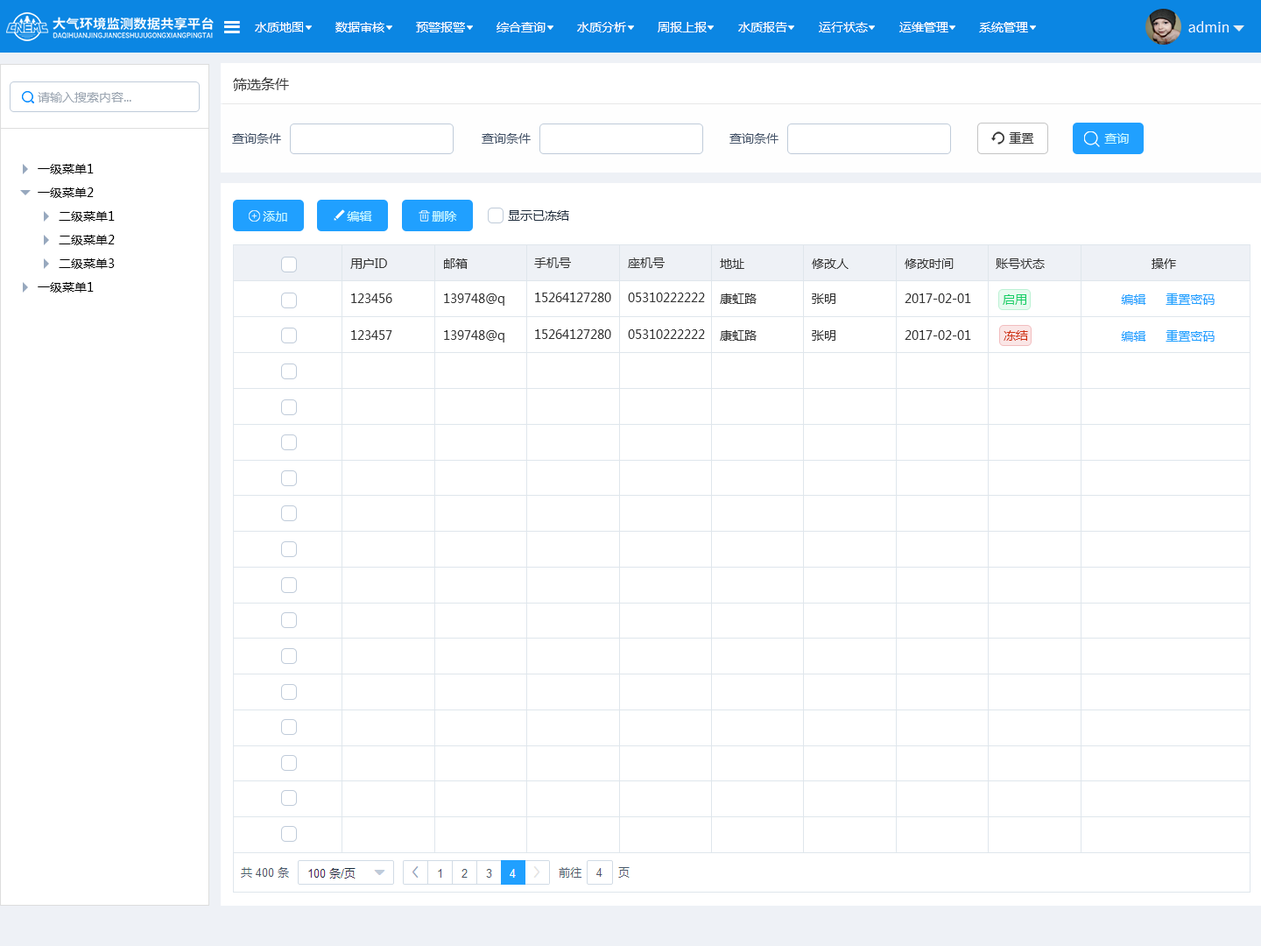
<style>
.page{position:relative;width:1261px;height:946px;background:#ffffff}
.page>*{position:absolute;margin:0}
.t1{font:12.3px "MicrosoftYaHei";color:#ffffff}
.t2{font:14px "SourceHanSansCN-Regular";color:#edf7ff}
.t3{font:14px "MicrosoftYaHei";color:#383838}
.t4{font:12.3px "MicrosoftYaHei";color:#9da7b3}
.t5{font:12.3px "MicrosoftYaHei";color:#47566b}
.t6{font:12.3px "MicrosoftYaHei";color:#383838}
.t7{font:12.3px "MicrosoftYaHei";color:#c7f9ff}
.t8{font:12.3px "MicrosoftYaHei";color:#000000}
.t9{font:12.3px "MicrosoftYaHei";color:#1f2d3d}
.t10{font:12.3px "MicrosoftYaHei";color:#333333}
.t11{font:12.3px "MicrosoftYaHei";color:#20a0ff}
.t12{font:12.3px "MicrosoftYaHei";color:#13ce66}
.t13{font:12.3px "MicrosoftYaHei";color:#cf3213}
</style>
<div class="page">
<p class="t1" style="left:255px;top:22px;width:48px;height:10px">水质地图</p>
<p class="t1" style="left:335px;top:22px;width:49px;height:10px">数据审核</p>
<p class="t1" style="left:416px;top:22px;width:49px;height:10px">预警报警</p>
<p class="t1" style="left:496px;top:22px;width:50px;height:10px">综合查询</p>
<p class="t1" style="left:577px;top:22px;width:49px;height:10px">水质分析</p>
<p class="t1" style="left:658px;top:22px;width:49px;height:10px">周报上报</p>
<p class="t1" style="left:738px;top:22px;width:49px;height:10px">水质报告</p>
<p class="t1" style="left:819px;top:22px;width:49px;height:10px">运行状态</p>
<p class="t1" style="left:899px;top:22px;width:49px;height:10px">运维管理</p>
<p class="t1" style="left:979px;top:22px;width:49px;height:10px">系统管理</p>
<p class="t2" style="left:1188px;top:21px;width:41px;height:11px">admin</p>
<p class="t3" style="left:233px;top:77px;width:56px;height:14px">筛选条件</p>
<p class="t4" style="left:38px;top:92px;width:93px;height:10px">请输入搜索内容...</p>
<p class="t5" style="left:232px;top:133px;width:49px;height:11px">查询条件</p>
<p class="t5" style="left:482px;top:133px;width:49px;height:11px">查询条件</p>
<p class="t5" style="left:729px;top:133px;width:49px;height:11px">查询条件</p>
<p class="t6" style="left:1009px;top:132px;width:25px;height:12px">重置</p>
<p class="t7" style="left:1104px;top:133px;width:25px;height:11px">查询</p>
<p class="t8" style="left:38px;top:164px;width:56px;height:10px">一级菜单1</p>
<p class="t8" style="left:38px;top:187px;width:56px;height:11px">一级菜单2</p>
<p class="t8" style="left:59px;top:211px;width:56px;height:11px">二级菜单1</p>
<p class="t7" style="left:263px;top:211px;width:24px;height:11px">添加</p>
<p class="t7" style="left:347px;top:211px;width:25px;height:11px">编辑</p>
<p class="t7" style="left:432px;top:211px;width:25px;height:11px">删除</p>
<p class="t9" style="left:508px;top:210px;width:61px;height:11px">显示已冻结</p>
<p class="t8" style="left:59px;top:235px;width:56px;height:10px">二级菜单2</p>
<p class="t10" style="left:534px;top:257px;width:37px;height:11px">手机号</p>
<p class="t10" style="left:628px;top:257px;width:37px;height:11px">座机号</p>
<p class="t8" style="left:59px;top:258px;width:56px;height:11px">二级菜单3</p>
<p class="t10" style="left:350px;top:258px;width:37px;height:11px">用户ID</p>
<p class="t10" style="left:444px;top:258px;width:24px;height:11px">邮箱</p>
<p class="t10" style="left:720px;top:258px;width:24px;height:11px">地址</p>
<p class="t10" style="left:812px;top:258px;width:36px;height:11px">修改人</p>
<p class="t10" style="left:905px;top:258px;width:49px;height:11px">修改时间</p>
<p class="t10" style="left:996px;top:258px;width:49px;height:11px">账号状态</p>
<p class="t10" style="left:1151px;top:258px;width:25px;height:11px">操作</p>
<p class="t8" style="left:38px;top:282px;width:56px;height:10px">一级菜单1</p>
<p class="t10" style="left:351px;top:293px;width:41px;height:10px">123456</p>
<p class="t10" style="left:444px;top:293px;width:60px;height:13px">139748@q</p>
<p class="t10" style="left:535px;top:292px;width:76px;height:10px">15264127280</p>
<p class="t10" style="left:628px;top:292px;width:77px;height:10px">05310222222</p>
<p class="t10" style="left:720px;top:293px;width:37px;height:11px">康虹路</p>
<p class="t10" style="left:812px;top:293px;width:23px;height:11px">张明</p>
<p class="t10" style="left:905px;top:293px;width:66px;height:10px">2017-02-01</p>
<p class="t11" style="left:1165px;top:293px;width:50px;height:12px">重置密码</p>
<p class="t12" style="left:1003px;top:294px;width:23px;height:11px">启用</p>
<p class="t11" style="left:1121px;top:294px;width:25px;height:11px">编辑</p>
<p class="t10" style="left:535px;top:329px;width:76px;height:10px">15264127280</p>
<p class="t10" style="left:628px;top:329px;width:77px;height:10px">05310222222</p>
<p class="t10" style="left:351px;top:330px;width:41px;height:10px">123457</p>
<p class="t10" style="left:444px;top:330px;width:60px;height:12px">139748@q</p>
<p class="t10" style="left:720px;top:330px;width:37px;height:11px">康虹路</p>
<p class="t10" style="left:812px;top:330px;width:23px;height:11px">张明</p>
<p class="t10" style="left:905px;top:330px;width:66px;height:10px">2017-02-01</p>
<p class="t13" style="left:1003px;top:330px;width:25px;height:11px">冻结</p>
<p class="t11" style="left:1121px;top:331px;width:25px;height:10px">编辑</p>
<p class="t11" style="left:1165px;top:330px;width:50px;height:11px">重置密码</p>
</div>
